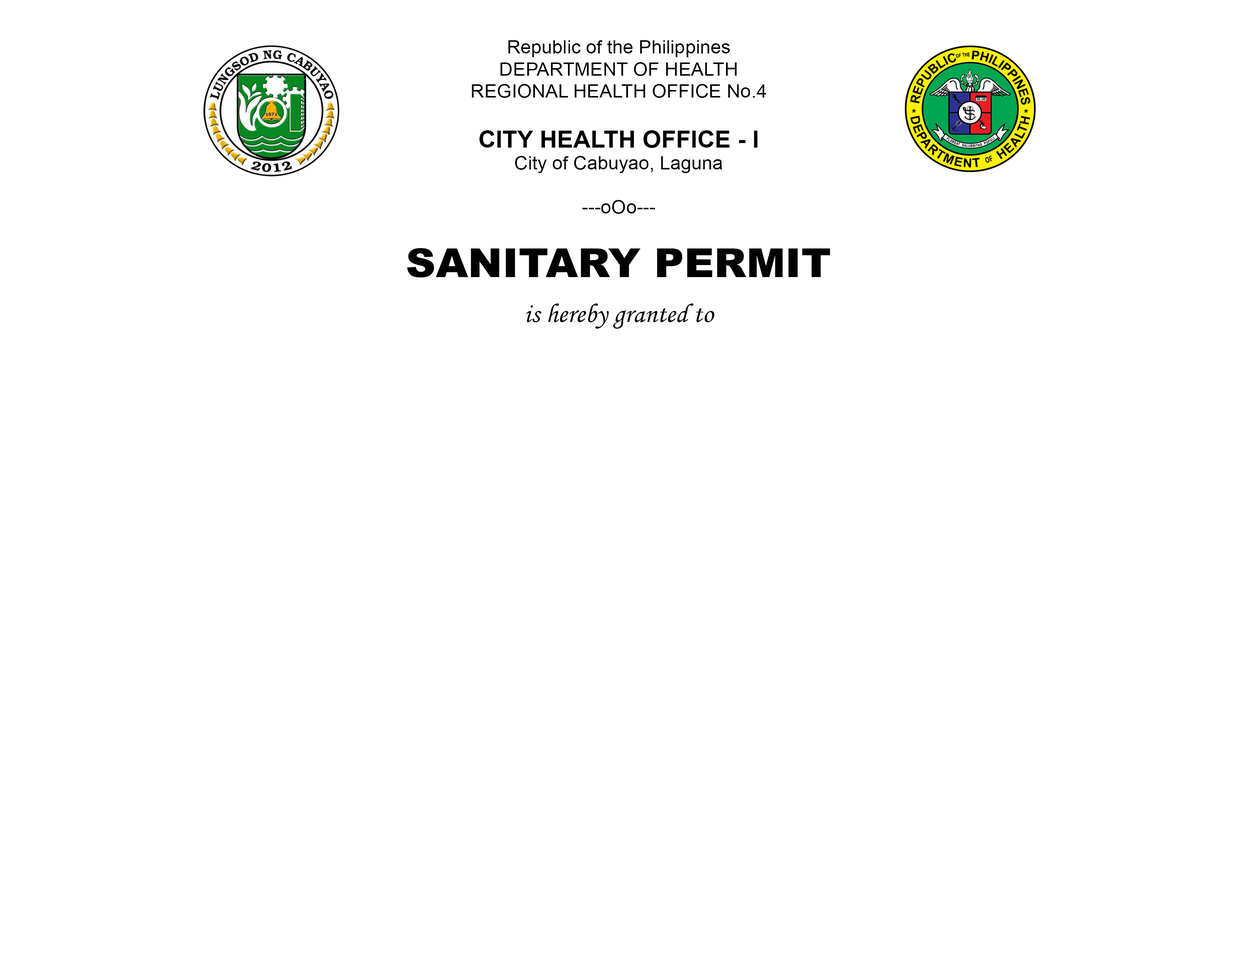
<style>
.page{position:relative;width:1242px;height:960px;background:#ffffff}
.page>*{position:absolute;margin:0}
.t1{font:18.3px "ArialMT";color:#000000;scale:1.04 1}
.t2{font:23.3px "Arial-BoldMT";color:#000000;scale:1.04 1}
.t3{font:40px "Arial-Black";color:#000000;scale:1.04 1}
.t4{font:26.7px "MonotypeCorsiva";color:#000000;scale:1.04 1}
</style>
<div class="page">
<p class="t1" style="left:472px;top:40px;width:294px;height:174px;text-align:center">Republic of the Philippines<br>DEPARTMENT OF HEALTH<br>REGIONAL HEALTH OFFICE No.4<br><br><span class="t2">CITY HEALTH OFFICE - I<br></span>City of Cabuyao, Laguna<br><br>---oOo---</p>
<p class="t3" style="left:407px;top:248px;width:423px;height:29px">SANITARY PERMIT</p>
<p class="t4" style="left:526px;top:303px;width:188px;height:26px">is hereby granted to</p>
</div>
